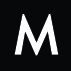
<style>
.page{position:relative;width:71px;height:71px;background:#070809}
.page>*{position:absolute;margin:0}
.t1{font:51px "Futura";letter-spacing:0.093em;color:#ffffff;font-weight:bold}
</style>
<div class="page">
<p class="t1" style="left:14px;top:14px;width:45px;height:42px">M</p>
</div>
